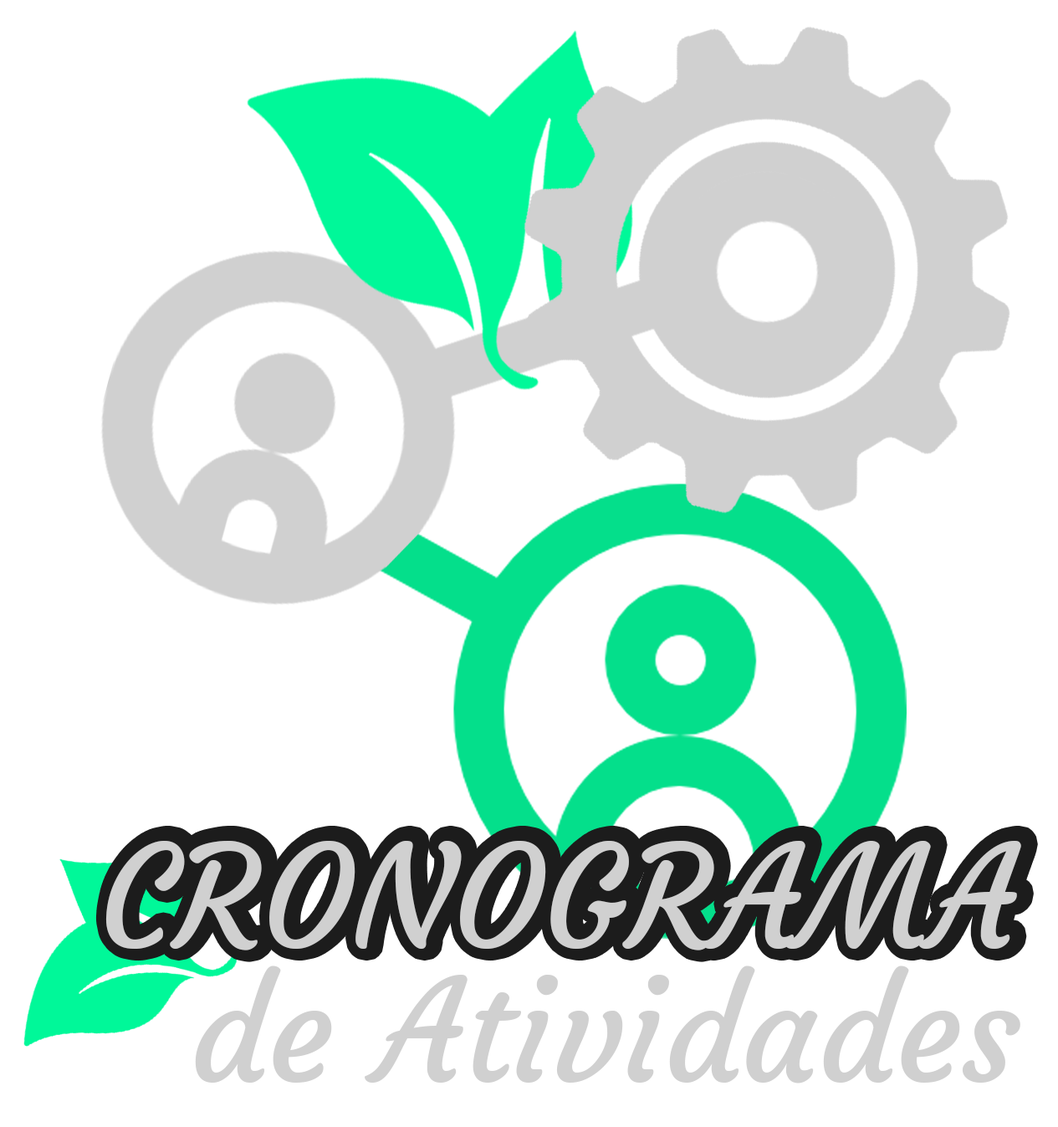
<style>
.page{position:relative;width:1058px;height:1127px;background:#ffffff}
.page>*{position:absolute;margin:0}
.t1{font:139.8px "Courgette-Regular";color:#d0d0d0}
</style>
<div class="page">
<p class="t1" style="left:105px;top:841px;width:916px;height:109px">CRONOGRAMA</p>
<p class="t1" style="left:195px;top:965px;width:826px;height:118px">de Atividades</p>
</div>
